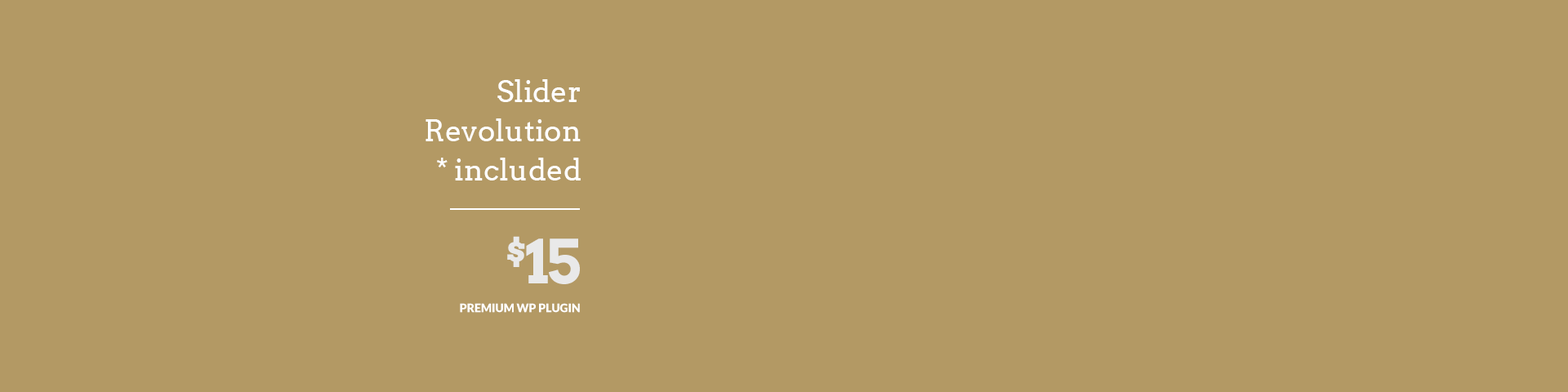
<style>
.page{position:relative;width:1568px;height:392px;background:#b39964}
.page>*{position:absolute;margin:0}
.t1{font:29.4px/39.2px "Arvo";color:#ffffff}
.t2{font:60.5px "Arvo-Bold";letter-spacing:-0.05em;color:#e9e9e9}
.t3{font:11.4px "Lato-Black";color:#ffffff;text-transform:uppercase}
</style>
<div class="page">
<p class="t1" style="left:425px;top:79px;width:156px;height:101px;text-align:right">Slider<br>Revolution<br>* included</p>
<p class="t2" style="left:507px;top:236px;width:73px;height:48px">$15</p>
<p class="t3" style="left:460px;top:303px;width:120px;height:10px">PREMIUM WP PLUGIN</p>
</div>
